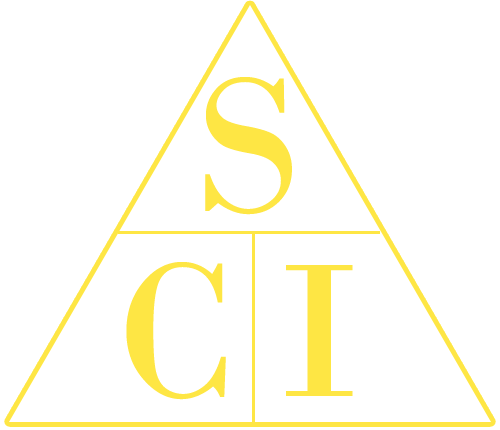
<style>
.page{position:relative;width:500px;height:430px;background:#ffffff}
.page>*{position:absolute;margin:0}
.t1{font:200px "BodoniMT";letter-spacing:0.005em;color:#fee644}
</style>
<div class="page">
<p class="t1" style="left:205px;top:77px;width:87px;height:138px">S</p>
<p class="t1" style="left:126px;top:262px;width:100px;height:138px">C</p>
<p class="t1" style="left:286px;top:265px;width:67px;height:131px">I</p>
</div>
